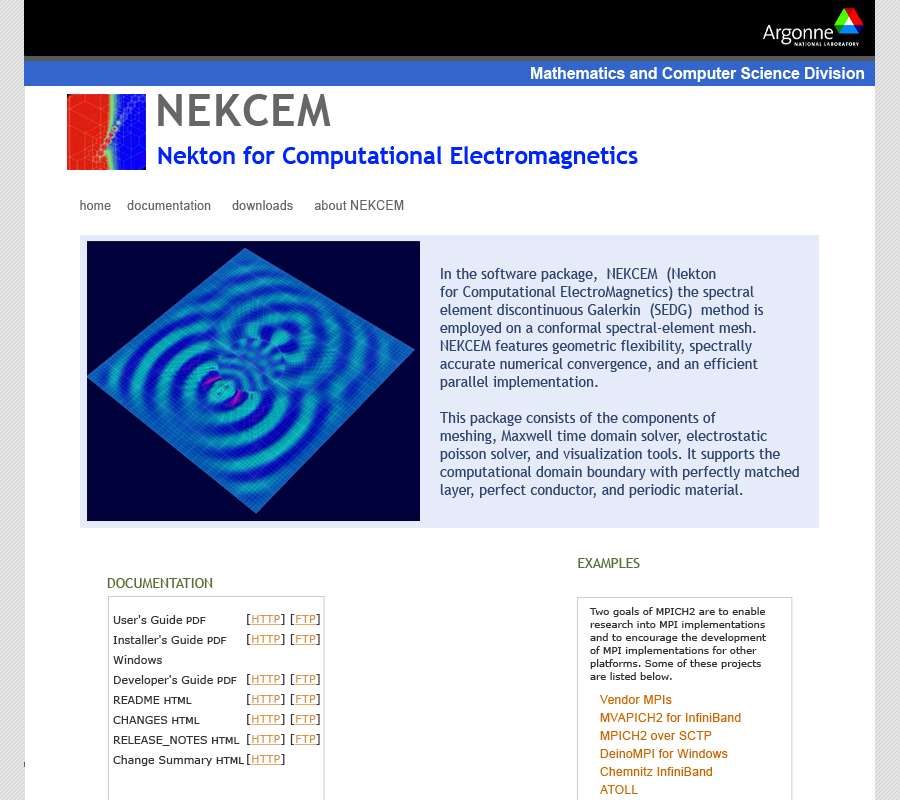
<style>
.page{position:relative;width:900px;height:800px;background:#ffffff}
.page>*{position:absolute;margin:0}
.t1{font:16px "Arial-BoldMT";letter-spacing:-0.01em;color:#ffffff}
.t2{font:45px "TrebuchetMS-Bold";letter-spacing:0.025em;color:#666666}
.t3{font:24px "TrebuchetMS-Bold";letter-spacing:-0.01em;color:#0024ff}
.t4{font:13px "ArialMT";letter-spacing:0.025em;color:#666666;scale:0.94 1}
.t5{font:15px "TrebuchetMS";color:#2f456f;scale:0.95 1}
.t6{font:14px "TrebuchetMS";color:#587036}
.t7{font:11px/20px "Verdana";color:#333333}
.t8{font:10px/20px "Verdana";color:#333333}
.t9{font:11px/20px "Verdana";letter-spacing:0.025em;color:#da8f44;text-decoration:underline}
.t10{font:11px/20px "Verdana";letter-spacing:0.025em;color:#333333}
.t11{font:10px/13px "Verdana";color:#333333}
.t12{font:12px/18px "ArialMT";letter-spacing:0.025em;color:#cc6600}
</style>
<div class="page">
<p class="t1" style="left:531px;top:67px;width:334px;height:15px">Mathematics and Computer Science Division</p>
<p class="t2" style="left:158px;top:94px;width:173px;height:32px">NEKCEM</p>
<p class="t3" style="left:158px;top:146px;width:480px;height:23px">Nekton for Computational Electromagnetics</p>
<p class="t4" style="left:80px;top:200px;width:31px;height:10px">home</p>
<p class="t4" style="left:127px;top:200px;width:84px;height:10px">documentation</p>
<p class="t4" style="left:232px;top:200px;width:61px;height:10px">downloads</p>
<p class="t4" style="left:314px;top:200px;width:90px;height:10px">about NEKCEM</p>
<p class="t5" style="left:440px;top:267px;width:359px;height:231px">In the software package,  NEKCEM  (Nekton <br>for Computational ElectroMagnetics) the spectral <br>element discontinuous Galerkin  (SEDG)  method is <br>employed on a conformal spectral-element mesh. <br>NEKCEM features geometric flexibility, spectrally <br>accurate numerical convergence, and an efficient <br>parallel implementation.<br><br>This package consists of the components of <br>meshing, Maxwell time domain solver, electrostatic <br>poisson solver, and visualization tools. It supports the <br>computational domain boundary with perfectly matched <br>layer, perfect conductor, and periodic material.</p>
<p class="t6" style="left:578px;top:558px;width:62px;height:10px">EXAMPLES</p>
<p class="t6" style="left:107px;top:578px;width:106px;height:10px">DOCUMENTATION</p>
<p class="t7" style="left:113px;top:615px;width:131px;height:151px">User's Guide<span class="t8"> PDF</span>  <br>Installer's Guide <span class="t8">PDF</span> <br>Windows <br>Developer's Guide <span class="t8">PDF</span>  <br>README <span class="t8">HTML</span>  <br>CHANGES <span class="t8">HTML</span>  <br>RELEASE_NOTES <span class="t8">HTML</span>  <br>Change Summary <span class="t8">HTML</span></p>
<p class="t9" style="left:247px;top:614px;width:73px;height:151px"><span class="t10">[</span>HTTP<span class="t10">] [</span>FTP<span class="t10">]<br>[</span>HTTP<span class="t10">] [</span>FTP<span class="t10">]<br><br>[</span>HTTP<span class="t10">] [</span>FTP<span class="t10">]<br>[</span>HTTP<span class="t10">] [</span>FTP<span class="t10">]<br>[</span>HTTP<span class="t10">] [</span>FTP<span class="t10">]<br>[</span>HTTP<span class="t10">] [</span>FTP<span class="t10">]<br>[</span>HTTP<span class="t10">]</span></p>
<p class="t11" style="left:589px;top:607px;width:177px;height:73px">Two goals of MPICH2 are to enable <br>research into MPI implementations <br>and to encourage the development <br>of MPI implementations for other <br>platforms. Some of these projects <br>are listed below.</p>
<p class="t12" style="left:600px;top:695px;width:141px;height:99px">Vendor MPIs<br>MVAPICH2 for InfiniBand<br>MPICH2 over SCTP<br>DeinoMPI for Windows<br>Chemnitz InfiniBand<br>ATOLL</p>
</div>
